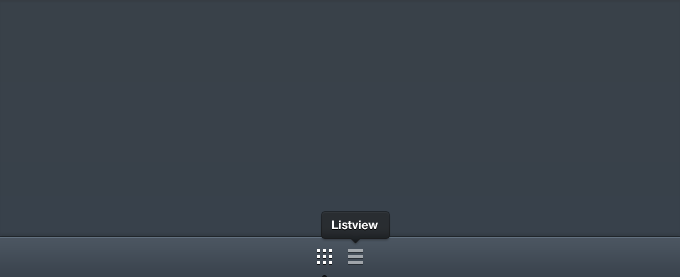
<style>
.page{position:relative;width:680px;height:278px;background:#39414a}
.page>*{position:absolute;margin:0}
.t1{font:12px "HelveticaNeue-Bold";color:#ffffff}
</style>
<div class="page">
<p class="t1" style="left:332px;top:220px;width:46px;height:10px">Listview</p>
</div>
